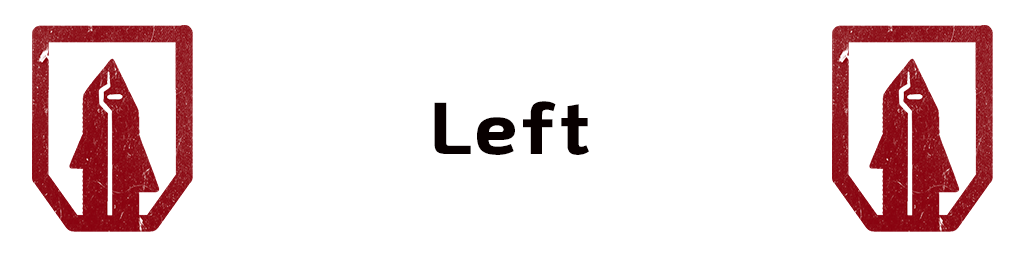
<style>
.page{position:relative;width:1024px;height:256px;background:#ffffff}
.page>*{position:absolute;margin:0}
.t1{font:72px "GyeonggiTitleV";color:#080000;scale:1.1 1}
</style>
<div class="page">
<p class="t1" style="left:434px;top:101px;width:155px;height:54px">Left</p>
</div>
